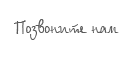
<style>
.page{position:relative;width:124px;height:59px;background:#ffffff}
.page>*{position:absolute;margin:0}
.t1{font:18px "BetinaScript";color:#5b5b5b;scale:0.88 1}
</style>
<div class="page">
<p class="t1" style="left:14px;top:19px;width:105px;height:21px">Позвоните нам</p>
</div>
